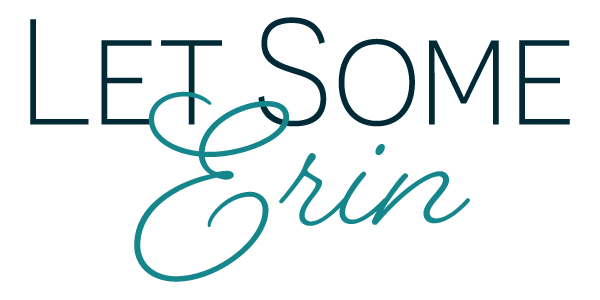
<style>
.page{position:relative;width:600px;height:300px;background:#ffffff}
.page>*{position:absolute;margin:0}
.t1{font:150px "Novecentosans-Light";letter-spacing:-0.025em;color:#012a36}
.t2{font:150px "Novecentosans-Light";letter-spacing:0.01em;color:#012a36}
.t3{font:200px "BelovedScript";letter-spacing:0.005em;color:#14868c}
</style>
<div class="page">
<p class="t1" style="left:30px;top:17px;width:540px;height:110px">Let <span class="t2">S</span>ome</p>
<p class="t3" style="left:134px;top:91px;width:336px;height:191px">Erin</p>
</div>
